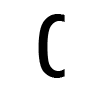
<style>
.page{position:relative;width:100px;height:100px;background:#ffffff}
.page>*{position:absolute;margin:0}
.t1{font:100px "TwCenMT-Condensed";color:#000000}
</style>
<div class="page">
<p class="t1" style="left:38px;top:14px;width:27px;height:64px">C</p>
</div>
